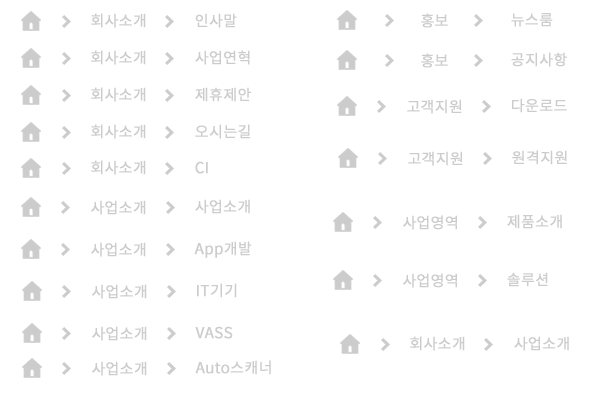
<style>
.page{position:relative;width:600px;height:400px;background:#ffffff}
.page>*{position:absolute;margin:0}
.t1{font:15px "NotoSansKR-Regular";color:#cccccc;font-weight:bold}
</style>
<div class="page">
<p class="t1" style="left:91px;top:13px;width:55px;height:15px">회사소개</p>
<p class="t1" style="left:195px;top:13px;width:42px;height:15px">인사말</p>
<p class="t1" style="left:421px;top:13px;width:27px;height:15px">홍보</p>
<p class="t1" style="left:511px;top:13px;width:42px;height:14px">뉴스룸</p>
<p class="t1" style="left:91px;top:50px;width:55px;height:15px">회사소개</p>
<p class="t1" style="left:195px;top:50px;width:55px;height:15px">사업연혁</p>
<p class="t1" style="left:421px;top:53px;width:27px;height:15px">홍보</p>
<p class="t1" style="left:511px;top:52px;width:56px;height:15px">공지사항</p>
<p class="t1" style="left:91px;top:87px;width:55px;height:15px">회사소개</p>
<p class="t1" style="left:195px;top:87px;width:56px;height:15px">제휴제안</p>
<p class="t1" style="left:407px;top:99px;width:55px;height:15px">고객지원</p>
<p class="t1" style="left:512px;top:98px;width:55px;height:15px">다운로드</p>
<p class="t1" style="left:91px;top:124px;width:55px;height:15px">회사소개</p>
<p class="t1" style="left:195px;top:124px;width:55px;height:15px">오시는길</p>
<p class="t1" style="left:512px;top:150px;width:55px;height:15px">원격지원</p>
<p class="t1" style="left:91px;top:160px;width:55px;height:15px">회사소개</p>
<p class="t1" style="left:195px;top:161px;width:13px;height:13px">CI</p>
<p class="t1" style="left:408px;top:151px;width:55px;height:15px">고객지원</p>
<p class="t1" style="left:91px;top:200px;width:55px;height:15px">사업소개</p>
<p class="t1" style="left:195px;top:199px;width:55px;height:15px">사업소개</p>
<p class="t1" style="left:403px;top:215px;width:54px;height:15px">사업영역</p>
<p class="t1" style="left:507px;top:214px;width:55px;height:15px">제품소개</p>
<p class="t1" style="left:91px;top:242px;width:55px;height:15px">사업소개</p>
<p class="t1" style="left:194px;top:241px;width:58px;height:17px">App개발</p>
<p class="t1" style="left:403px;top:273px;width:54px;height:15px">사업영역</p>
<p class="t1" style="left:507px;top:272px;width:41px;height:15px">솔루션</p>
<p class="t1" style="left:92px;top:284px;width:55px;height:15px">사업소개</p>
<p class="t1" style="left:197px;top:283px;width:40px;height:15px">IT기기</p>
<p class="t1" style="left:92px;top:326px;width:55px;height:15px">사업소개</p>
<p class="t1" style="left:195px;top:326px;width:38px;height:13px">VASS</p>
<p class="t1" style="left:410px;top:336px;width:55px;height:15px">회사소개</p>
<p class="t1" style="left:514px;top:336px;width:55px;height:15px">사업소개</p>
<p class="t1" style="left:92px;top:361px;width:55px;height:15px">사업소개</p>
<p class="t1" style="left:195px;top:360px;width:76px;height:15px">Auto스캐너</p>
</div>
